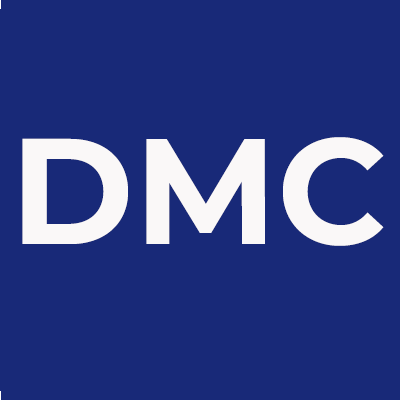
<style>
.page{position:relative;width:400px;height:400px;background:#182978}
.page>*{position:absolute;margin:0}
.t1{font:150px "Montserrat-Bold";color:#faf8f8;text-transform:uppercase}
</style>
<div class="page">
<p class="t1" style="left:22px;top:137px;width:362px;height:109px">DMC</p>
</div>
